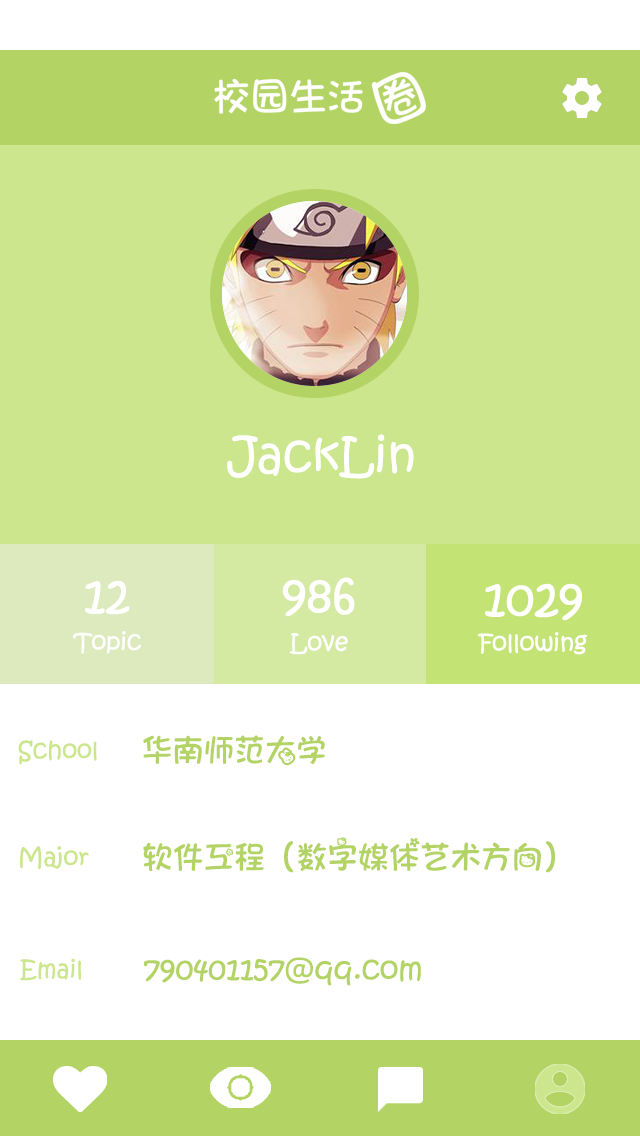
<style>
.page{position:relative;width:640px;height:1136px;background:#ffffff}
.page>*{position:absolute;margin:0}
.t1{font:48px "kitty-";color:#ffffff}
.t2{font:24px "kitty-";color:#ffffff}
.t3{font:30px "kitty-";color:#b3d465}
.t4{font:24px "kitty-";color:#cbe68c}
</style>
<div class="page">
<p class="t1" style="left:227px;top:434px;width:187px;height:45px">JackLin</p>
<p class="t1" style="left:85px;top:580px;width:45px;height:35px">12</p>
<p class="t1" style="left:282px;top:577px;width:73px;height:40px">986</p>
<p class="t1" style="left:485px;top:583px;width:97px;height:38px">1029</p>
<p class="t2" style="left:73px;top:631px;width:68px;height:23px">Topic</p>
<p class="t2" style="left:289px;top:633px;width:59px;height:22px">Love</p>
<p class="t2" style="left:477px;top:632px;width:111px;height:23px">Following</p>
<p class="t3" style="left:143px;top:735px;width:182px;height:31px">华南师范大学</p>
<p class="t4" style="left:18px;top:740px;width:79px;height:25px">School</p>
<p class="t4" style="left:20px;top:846px;width:69px;height:24px">Major</p>
<p class="t3" style="left:143px;top:837px;width:412px;height:36px">软件工程（数字媒体艺术方向）</p>
<p class="t4" style="left:20px;top:958px;width:61px;height:23px">Email</p>
<p class="t3" style="left:144px;top:957px;width:277px;height:29px">790401157@qq.com</p>
</div>
